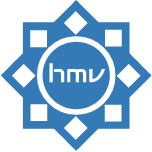
<style>
.page{position:relative;width:152px;height:152px;background:#ffffff}
.page>*{position:absolute;margin:0}
.t1{font:25.2px "Audiowide-Regular";color:#ffffff}
</style>
<div class="page">
<p class="t1" style="left:49px;top:63px;width:57px;height:20px">hmv</p>
</div>
